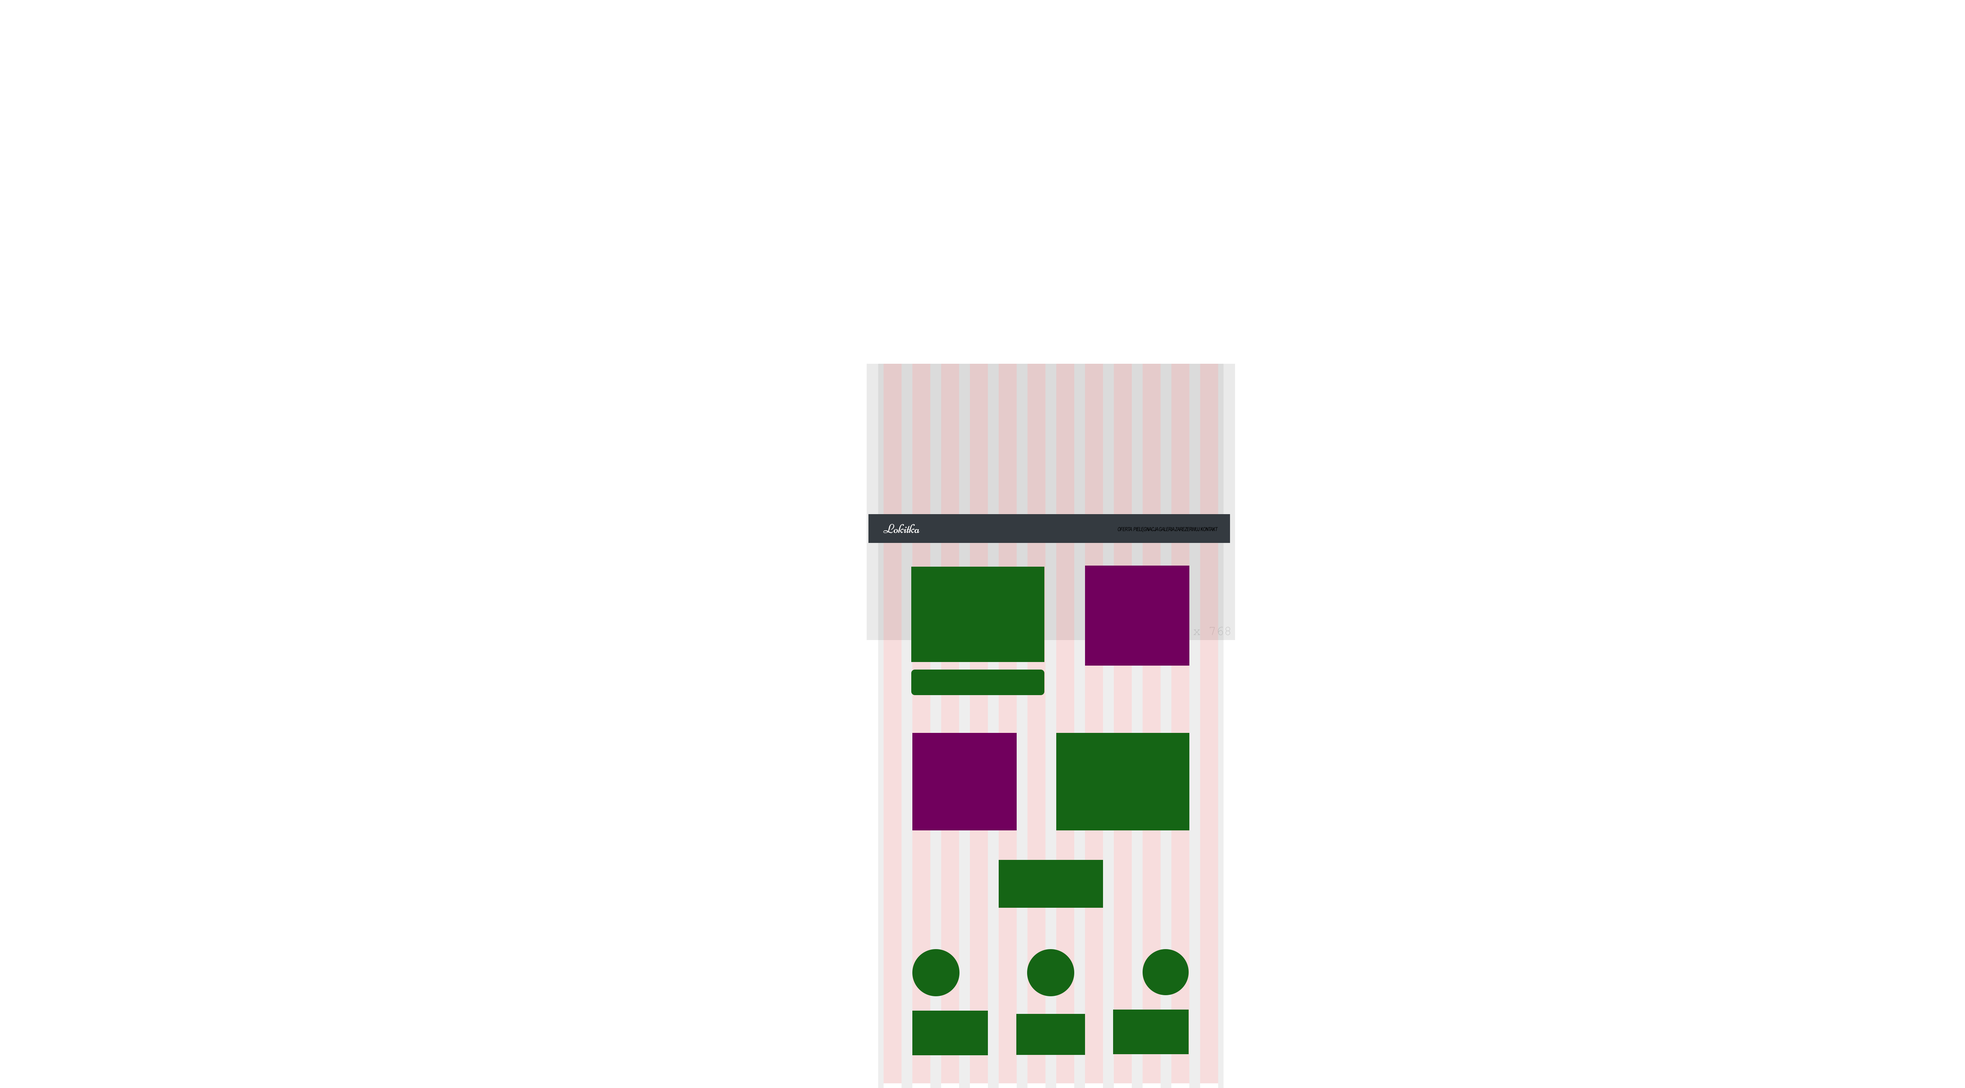
<style>
.page{position:relative;width:1965px;height:1088px;background:#ffffff}
.page>*{position:absolute;margin:0}
.t1{font:12.6px "Niconne-Regular";color:#ffffff}
.t2{font:5.4px "ArialMT";letter-spacing:-0.05em;color:#000000;text-transform:uppercase;font-style:italic;scale:0.72 1}
</style>
<div class="page">
<p class="t1" style="left:883px;top:524px;width:36px;height:9px">Lokitka</p>
<p class="t2" style="left:1118px;top:527px;width:100px;height:5px">Oferta  Pielęgnacja Galeria Zarezerwuj Kontakt</p>
</div>
